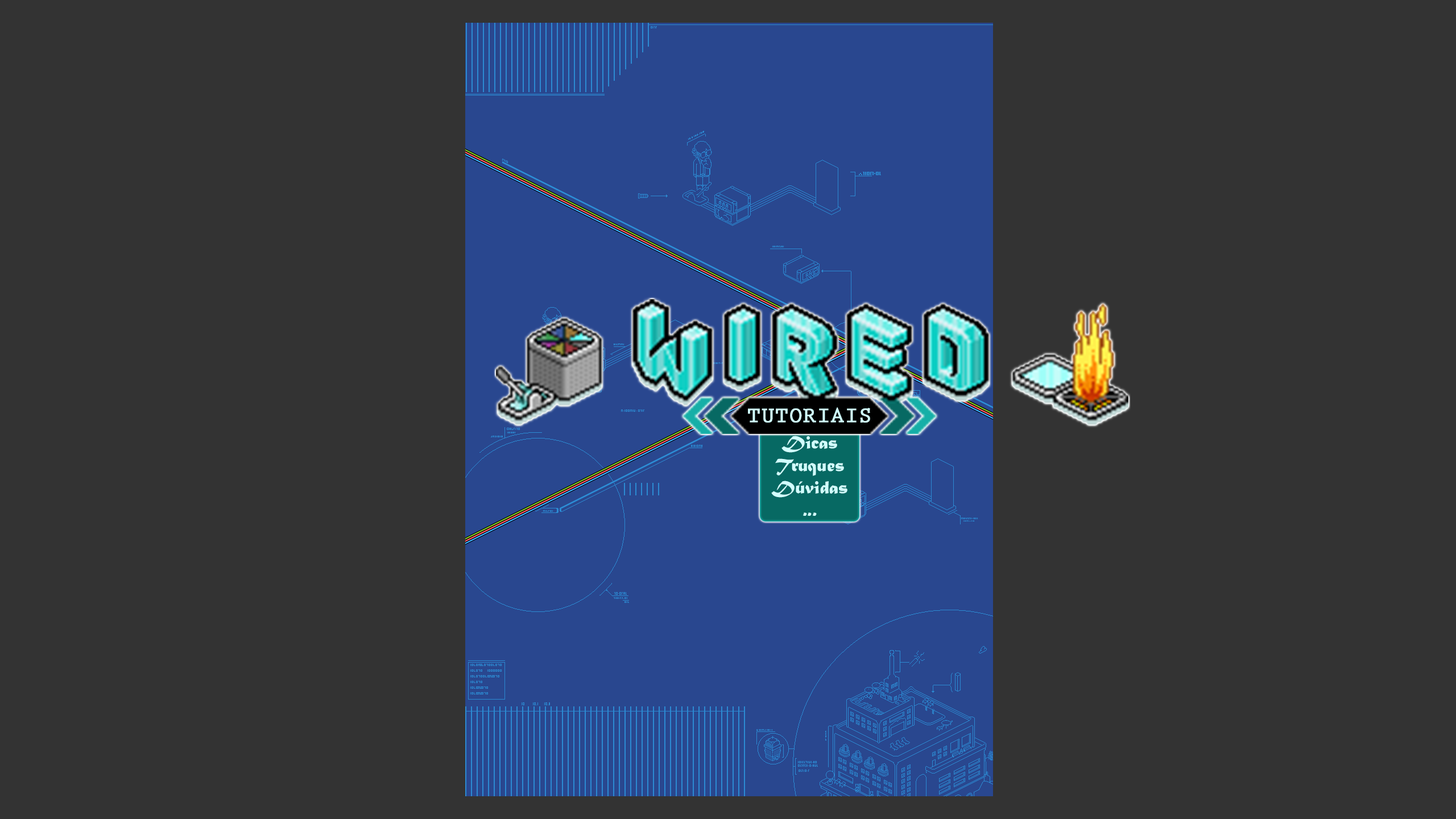
<style>
.page{position:relative;width:1456px;height:819px;background:#333333}
.page>*{position:absolute;margin:0}
.t1{font:22.2px "PrestigeEliteStd-Bd";color:#d1ffff;font-weight:bold}
.t2{font:18.8px "MaturaMTScriptCapitals";color:#d1ffff}
</style>
<div class="page">
<p class="t1" style="left:748px;top:407px;width:122px;height:16px">TUTORIAIS</p>
<p class="t2" style="left:771px;top:436px;width:76px;height:80px;text-align:center">Dicas<br>Truques<br>Dúvidas<br>...</p>
</div>
